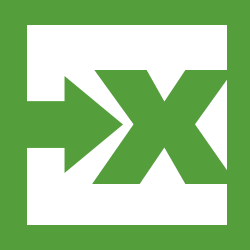
<style>
.page{position:relative;width:250px;height:250px;background:#549f3b}
.page>*{position:absolute;margin:0}
.t1{font:220px "Arial-Black";color:#549f3b}
</style>
<div class="page">
<p class="t1" style="left:92px;top:70px;width:145px;height:114px">x</p>
</div>
